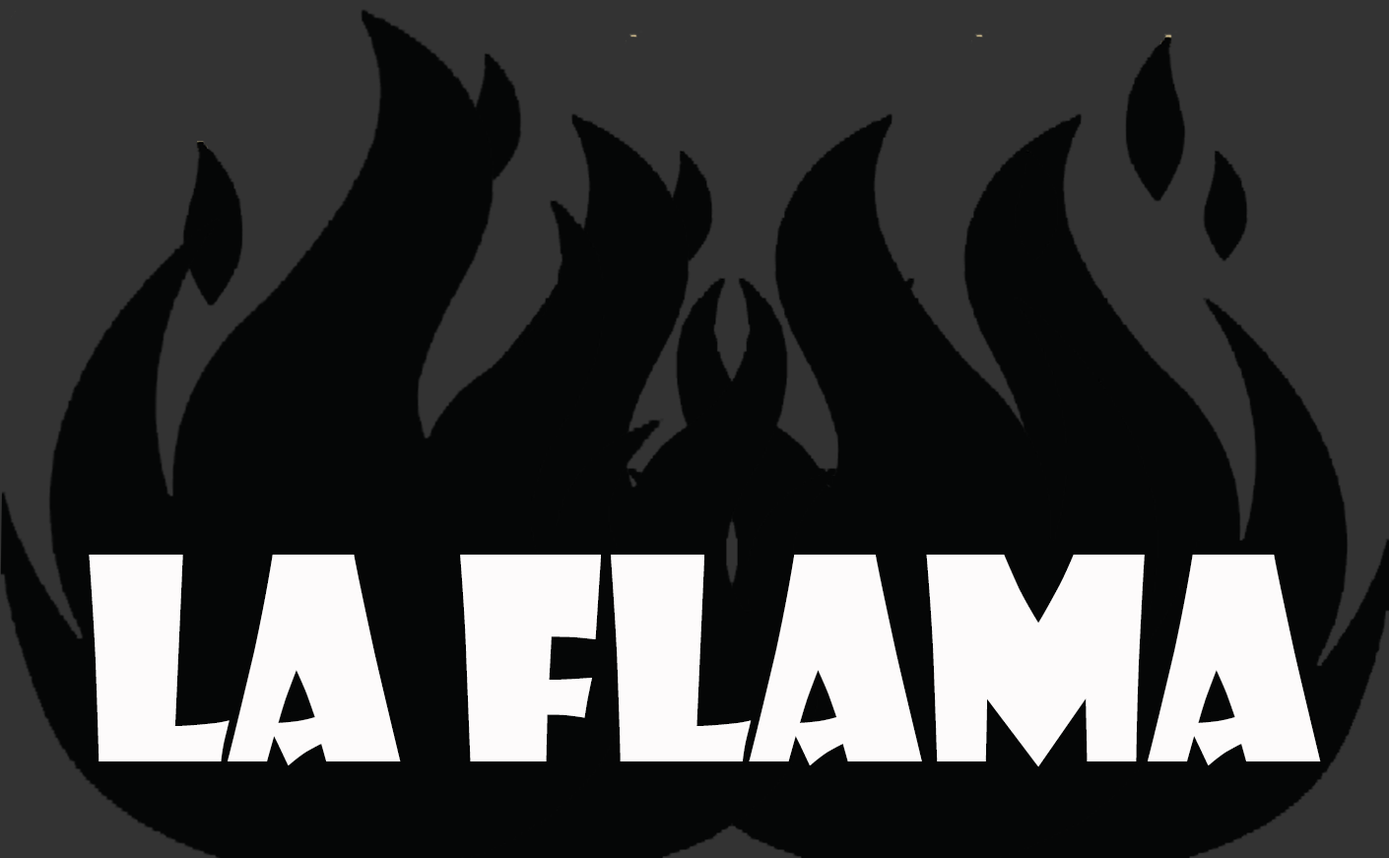
<style>
.page{position:relative;width:1389px;height:858px;background:#050606}
.page>*{position:absolute;margin:0}
.t1{font:275.9px "ShowcardGothic-Reg";color:#fdfbfb}
</style>
<div class="page">
<p class="t1" style="left:89px;top:555px;width:1232px;height:213px">LA FLAMA</p>
</div>
